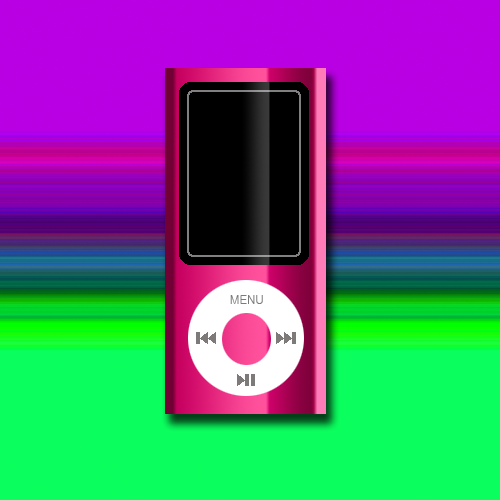
<style>
.page{position:relative;width:500px;height:500px}
.page>*{position:absolute;margin:0}
.t1{font:12px "Gulim";color:#7d7a7a}
</style>
<div class="page">
<p class="t1" style="left:230px;top:295px;width:33px;height:9px">MENU</p>
</div>
